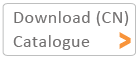
<style>
.page{position:relative;width:140px;height:60px;background:#ffffff}
.page>*{position:absolute;margin:0}
.t1{font:18px/24px "Calibri";letter-spacing:0.025em;color:#737171}
.t2{font:29px "Arial-Black";letter-spacing:0.01em;color:#f8943b;scale:0.69 1}
</style>
<div class="page">
<p class="t1" style="left:13px;top:11px;width:116px;height:39px">Download (CN)<br>Catalogue</p>
<p class="t2" style="left:119px;top:32px;width:12px;height:17px">&gt;</p>
</div>
